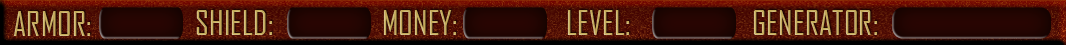
<style>
.page{position:relative;width:1066px;height:45px}
.page>*{position:absolute;margin:0}
.t1{font:33.2px "AgencyFB-Reg";color:#c3a958}
.t2{font:33.2px "AgencyFB-Reg"}
</style>
<div class="page">
<p class="t1" style="left:14px;top:11px;width:77px;height:25px">ARMOR:</p>
<p class="t2" style="left:196px;top:10px;width:77px;height:25px">SHIELD:</p>
<p class="t1" style="left:383px;top:10px;width:74px;height:25px">MONEY:</p>
<p class="t2" style="left:567px;top:10px;width:63px;height:25px">LEVEL:</p>
<p class="t1" style="left:753px;top:10px;width:125px;height:25px">GENERATOR:</p>
</div>
